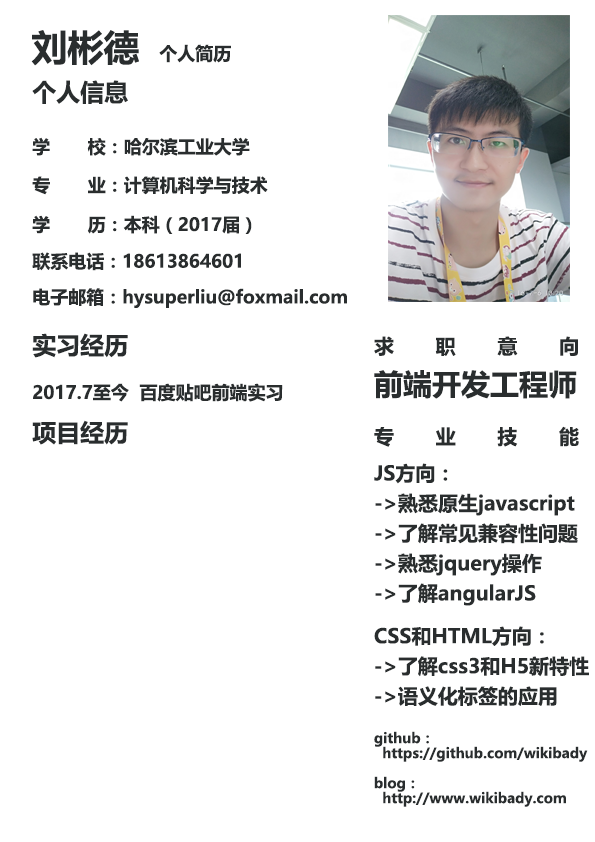
<style>
.page{position:relative;width:595px;height:842px;background:#ffffff}
.page>*{position:absolute;margin:0}
.t1{font:36px "MicrosoftYaHei-Bold";color:#292d2e}
.t2{font:18px "MicrosoftYaHei-Bold";color:#292d2e}
.t3{font:24px "MicrosoftYaHei-Bold";color:#292d2e}
.t4{font:18px/15px "MicrosoftYaHei-Bold";color:#292d2e}
.t5{font:24px/15px "MicrosoftYaHei-Bold";color:#292d2e}
.t6{font:20px "MicrosoftYaHei-Bold";color:#292d2e}
.t7{font:29px "MicrosoftYaHei-Bold";color:#292d2e}
.t8{font:20px/15px "MicrosoftYaHei-Bold";color:#292d2e}
.t9{font:14px/15px "MicrosoftYaHei-Bold";color:#292d2e}
</style>
<div class="page">
<p class="t1" style="left:31px;top:30px;width:108px;height:36px">刘彬德</p>
<p class="t2" style="left:159px;top:44px;width:72px;height:19px">个人简历</p>
<p class="t3" style="left:32px;top:80px;width:96px;height:24px">个人信息</p>
<p class="t2" style="left:32px;top:137px;width:218px;height:19px">学       校：哈尔滨工业大学</p>
<p class="t2" style="left:32px;top:176px;width:236px;height:19px">专       业：计算机科学与技术</p>
<p class="t2" style="left:32px;top:215px;width:220px;height:19px">学       历：本科（2017届）</p>
<p class="t2" style="left:32px;top:252px;width:209px;height:19px">联系电话：18613864601</p>
<p class="t2" style="left:33px;top:288px;width:314px;height:20px">电子邮箱：hysuperliu@foxmail.com</p>
<p class="t4" style="left:32px;top:333px;width:251px;height:69px"><span class="t5">实习经历<br><br><br></span>2017.7至今  百度贴吧前端实习</p>
<p class="t6" style="left:374px;top:336px;width:204px;height:20px">求       职       意       向</p>
<p class="t7" style="left:374px;top:370px;width:203px;height:29px">前端开发工程师</p>
<p class="t3" style="left:32px;top:420px;width:96px;height:25px">项目经历</p>
<p class="t6" style="left:374px;top:426px;width:205px;height:21px">专       业       技       能</p>
<p class="t8" style="left:374px;top:463px;width:204px;height:143px">JS方向：<br><br>-&gt;熟悉原生javascript<br><br>-&gt;了解常见兼容性问题<br><br>-&gt;熟悉jquery操作<br><br>-&gt;了解angularJS</p>
<p class="t8" style="left:374px;top:626px;width:215px;height:80px">CSS和HTML方向：<br><br>-&gt;了解css3和H5新特性<br><br>-&gt;语义化标签的应用</p>
<p class="t9" style="left:374px;top:731px;width:214px;height:76px">github：<br>  https://github.com/wikibady<br><br>blog：<br>  http://www.wikibady.com</p>
</div>
